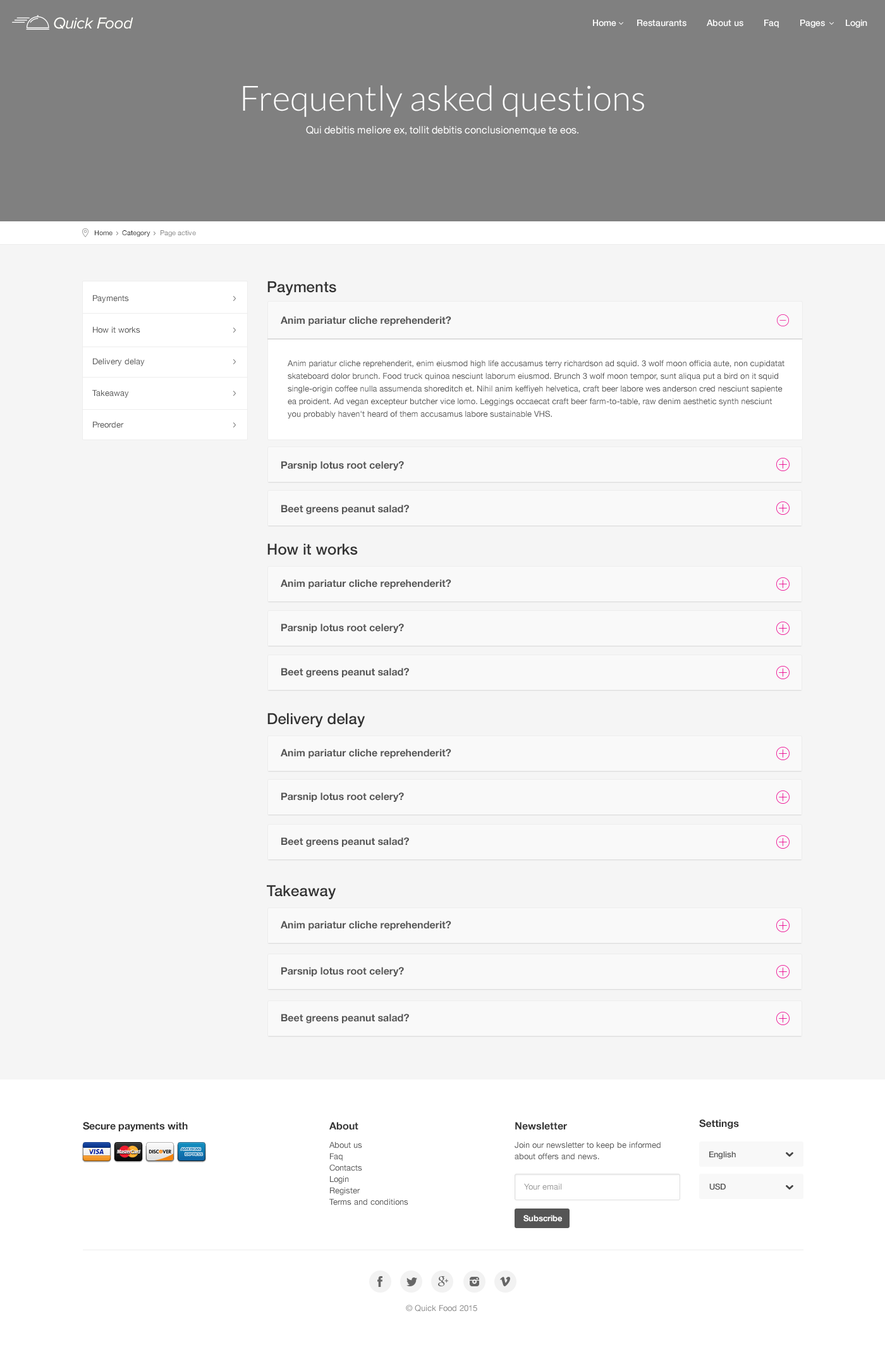
<style>
.page{position:relative;width:885px;height:1347px;background:#f5f5f5}
.page>*{position:absolute;margin:0}
.t1{font:16.4px "ProximaNova-RegularIt";letter-spacing:-0.025em;color:#fefef9}
.t2{font:8.9px "HelveticaNeue-Medium";color:#ffffff}
.t3{font:10.1px/22.8px "HelveticaNeue";color:#ffffff}
.t4{font:34.8px/30.4px "Lato-Light";color:#ffffff}
.t5{font:7px "HelveticaNeue";color:#252525}
.t6{font:7px "HelveticaNeue";color:#888888}
.t7{font:15.2px "HelveticaNeue-Medium";color:#333333}
.t8{font:8.2px/31.6px "HelveticaNeue";color:#555555}
.t9{font:10.1px "HelveticaNeue-Bold";color:#555555}
.t10{font:8.2px/12.6px "HelveticaNeue";color:#555555}
.t11{font:10.1px "HelveticaNeue-Bold";color:#333333}
.t12{font:8.2px/11.4px "HelveticaNeue";color:#555555}
.t13{font:8.2px "HelveticaNeue-Medium";color:#555555}
.t14{font:8.2px "HelveticaNeue";color:#999999}
.t15{font:8.2px "HelveticaNeue-Bold";color:#ffffff}
.t16{font:8.2px "HelveticaNeue";color:#8c8c8c}
</style>
<div class="page">
<p class="t1" style="left:54px;top:17px;width:79px;height:12px">Quick Food</p>
<p class="t2" style="left:593px;top:20px;width:275px;height:8px">Home        Restaurants        About us        Faq        Pages        Login</p>
<p class="t3" style="left:243px;top:85px;width:401px;height:51px;text-align:center"><span class="t4">Frequently asked questions<br></span>Qui debitis meliore ex, tollit debitis conclusionemque te eos.</p>
<p class="t5" style="left:95px;top:230px;width:101px;height:7px">Home     Category     <span class="t6">Page active</span></p>
<p class="t7" style="left:267px;top:281px;width:69px;height:14px">Payments</p>
<p class="t8" style="left:92px;top:295px;width:53px;height:133px">Payments<br>How it works<br>Delivery delay<br>Takeaway<br>Preorder</p>
<p class="t9" style="left:281px;top:316px;width:171px;height:10px">Anim pariatur cliche reprehenderit?</p>
<p class="t10" style="left:288px;top:360px;width:497px;height:59px">Anim pariatur cliche reprehenderit, enim eiusmod high life accusamus terry richardson ad squid. 3 wolf moon officia aute, non cupidatat skateboard dolor brunch. Food truck quinoa nesciunt laborum eiusmod. Brunch 3 wolf moon tempor, sunt aliqua put a bird on it squid single-origin coffee nulla assumenda shoreditch et. Nihil anim keffiyeh helvetica, craft beer labore wes anderson cred nesciunt sapiente ea proident. Ad vegan excepteur butcher vice lomo. Leggings occaecat craft beer farm-to-table, raw denim aesthetic synth nesciunt you probably haven't heard of them accusamus labore sustainable VHS.</p>
<p class="t9" style="left:281px;top:461px;width:123px;height:9px">Parsnip lotus root celery?</p>
<p class="t9" style="left:281px;top:505px;width:128px;height:9px">Beet greens peanut salad?</p>
<p class="t7" style="left:267px;top:543px;width:91px;height:12px">How it works</p>
<p class="t9" style="left:281px;top:579px;width:171px;height:10px">Anim pariatur cliche reprehenderit?</p>
<p class="t9" style="left:281px;top:624px;width:123px;height:9px">Parsnip lotus root celery?</p>
<p class="t9" style="left:281px;top:668px;width:128px;height:9px">Beet greens peanut salad?</p>
<p class="t7" style="left:267px;top:713px;width:99px;height:14px">Delivery delay</p>
<p class="t9" style="left:281px;top:749px;width:171px;height:9px">Anim pariatur cliche reprehenderit?</p>
<p class="t9" style="left:281px;top:792px;width:123px;height:10px">Parsnip lotus root celery?</p>
<p class="t9" style="left:281px;top:837px;width:128px;height:10px">Beet greens peanut salad?</p>
<p class="t7" style="left:267px;top:885px;width:69px;height:14px">Takeaway</p>
<p class="t9" style="left:281px;top:921px;width:171px;height:9px">Anim pariatur cliche reprehenderit?</p>
<p class="t9" style="left:281px;top:967px;width:123px;height:9px">Parsnip lotus root celery?</p>
<p class="t9" style="left:281px;top:1014px;width:128px;height:9px">Beet greens peanut salad?</p>
<p class="t11" style="left:83px;top:1122px;width:105px;height:9px">Secure payments with</p>
<p class="t11" style="left:329px;top:1122px;width:30px;height:8px">About</p>
<p class="t11" style="left:515px;top:1122px;width:52px;height:8px">Newsletter</p>
<p class="t11" style="left:699px;top:1119px;width:40px;height:10px">Settings</p>
<p class="t12" style="left:329px;top:1141px;width:80px;height:64px">About us<br>Faq<br>Contacts<br>Login<br>Register<br>Terms and conditions</p>
<p class="t12" style="left:515px;top:1141px;width:146px;height:19px">Join our newsletter to keep be informed about offers and news.</p>
<p class="t13" style="left:710px;top:1151px;width:26px;height:8px">English</p>
<p class="t14" style="left:524px;top:1183px;width:38px;height:7px">Your email</p>
<p class="t13" style="left:710px;top:1183px;width:16px;height:7px">USD</p>
<p class="t15" style="left:524px;top:1215px;width:38px;height:7px">Subscribe</p>
<p class="t16" style="left:406px;top:1305px;width:71px;height:7px">© Quick Food 2015</p>
</div>
